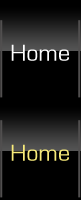
<style>
.page{position:relative;width:81px;height:200px;background:#000000}
.page>*{position:absolute;margin:0}
.t1{font:24px "EurostileRegular";color:#ffffff}
.t2{font:24px "EurostileRegular";color:#f8eb7a}
</style>
<div class="page">
<p class="t1" style="left:11px;top:44px;width:58px;height:17px">Home</p>
<p class="t2" style="left:11px;top:144px;width:58px;height:17px">Home</p>
</div>
